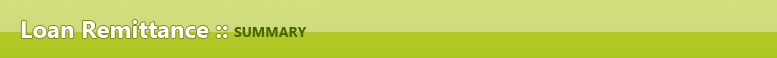
<style>
.page{position:relative;width:777px;height:58px}
.page>*{position:absolute;margin:0}
.t1{font:24px "SegoeUI-Bold";color:#fefefe}
.t2{font:14px "SegoeUI-Bold";color:#4a6706}
</style>
<div class="page">
<p class="t1" style="left:21px;top:20px;width:207px;height:18px">Loan Remittance ::</p>
<p class="t2" style="left:234px;top:27px;width:73px;height:10px">SUMMARY</p>
</div>
